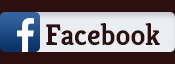
<style>
.page{position:relative;width:175px;height:64px;background:#2c1010}
.page>*{position:absolute;margin:0}
.t1{font:30px "Kreon-Bold";color:#2c1010}
</style>
<div class="page">
<p class="t1" style="left:46px;top:23px;width:114px;height:22px">Facebook</p>
</div>
